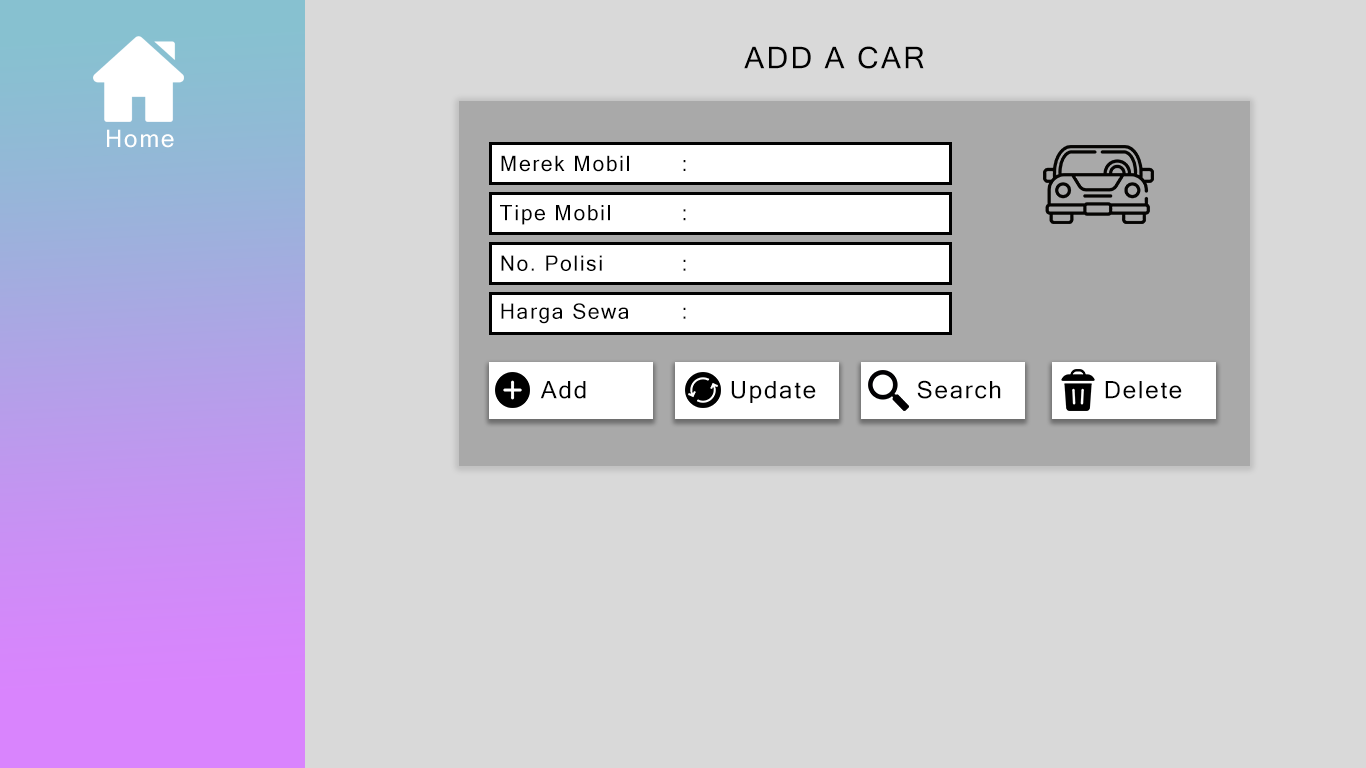
<style>
.page{position:relative;width:1366px;height:768px;background:#d9d9d9}
.page>*{position:absolute;margin:0}
.t1{font:30px "MicrosoftSansSerif";letter-spacing:0.075em;color:#000000}
.t2{font:24px "MicrosoftSansSerif";letter-spacing:0.075em;color:#ffffff}
.t3{font:21.2px "MicrosoftSansSerif";letter-spacing:0.075em;color:#000000}
.t4{font:24px "MicrosoftSansSerif";letter-spacing:0.075em;color:#000000}
</style>
<div class="page">
<p class="t1" style="left:744px;top:46px;width:180px;height:23px">ADD A CAR</p>
<p class="t2" style="left:107px;top:129px;width:67px;height:19px">Home</p>
<p class="t3" style="left:501px;top:155px;width:185px;height:17px">Merek Mobil  :</p>
<p class="t3" style="left:500px;top:205px;width:186px;height:20px">Tipe Mobil   :</p>
<p class="t3" style="left:501px;top:255px;width:185px;height:16px">No. Polisi   :</p>
<p class="t3" style="left:501px;top:303px;width:185px;height:21px">Harga Sewa  :</p>
<p class="t4" style="left:540px;top:381px;width:46px;height:18px">Add</p>
<p class="t4" style="left:731px;top:381px;width:85px;height:22px">Update</p>
<p class="t4" style="left:917px;top:380px;width:84px;height:19px">Search</p>
<p class="t4" style="left:1105px;top:381px;width:77px;height:18px">Delete</p>
</div>
